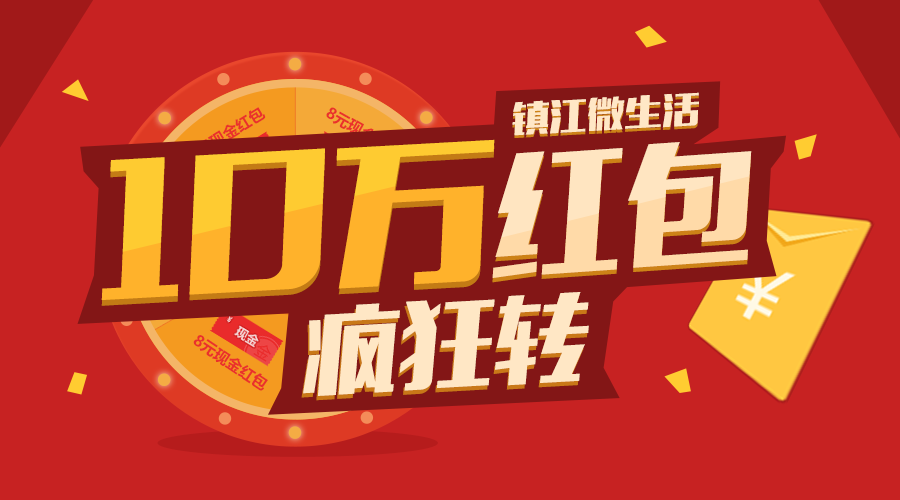
<style>
.page{position:relative;width:900px;height:500px;background:#c72222}
.page>*{position:absolute;margin:0}
.t1{font:34.9px "MFLiHei_Noncommercial-Regular";scale:1.08 1}
.t2{font:34.9px "MFLiHei_Noncommercial-Regular";color:#ffe7c6;scale:1.08 1}
.t3{font:15.3px "MicrosoftYaHeiUI-Bold";color:#f3352f}
.t4{font:153.5px "MFLiHei_Noncommercial-Regular";scale:1.08 1}
.t5{font:131.4px "MFLiHei_Noncommercial-Regular"}
.t6{font:94.8px "MFLiHei_Noncommercial-Regular";color:#ffe7c5}
</style>
<div class="page">
<p class="t1" style="left:512px;top:95px;width:187px;height:43px;rotate:-3deg">镇江微生活</p>
<p class="t2" style="left:512px;top:92px;width:187px;height:44px;rotate:-3deg">镇江微生活</p>
<p class="t3" style="left:188px;top:107px;width:78px;height:52px;rotate:-32deg">8元现金红包</p>
<p class="t4" style="left:101px;top:145px;width:394px;height:161px;rotate:-3deg">10万</p>
<p class="t4" style="left:101px;top:139px;width:394px;height:161px;rotate:-3deg">10万</p>
<p class="t5" style="left:492px;top:146px;width:259px;height:137px;rotate:-4deg">红包</p>
<p class="t5" style="left:492px;top:142px;width:260px;height:136px;rotate:-4deg">红包</p>
<p class="t6" style="left:303px;top:292px;width:286px;height:104px;rotate:-3deg">疯狂转</p>
<p class="t6" style="left:301px;top:296px;width:287px;height:105px;rotate:-3deg">疯狂转</p>
<p class="t3" style="left:193px;top:335px;width:75px;height:56px;rotate:34deg">8元现金红包</p>
</div>
